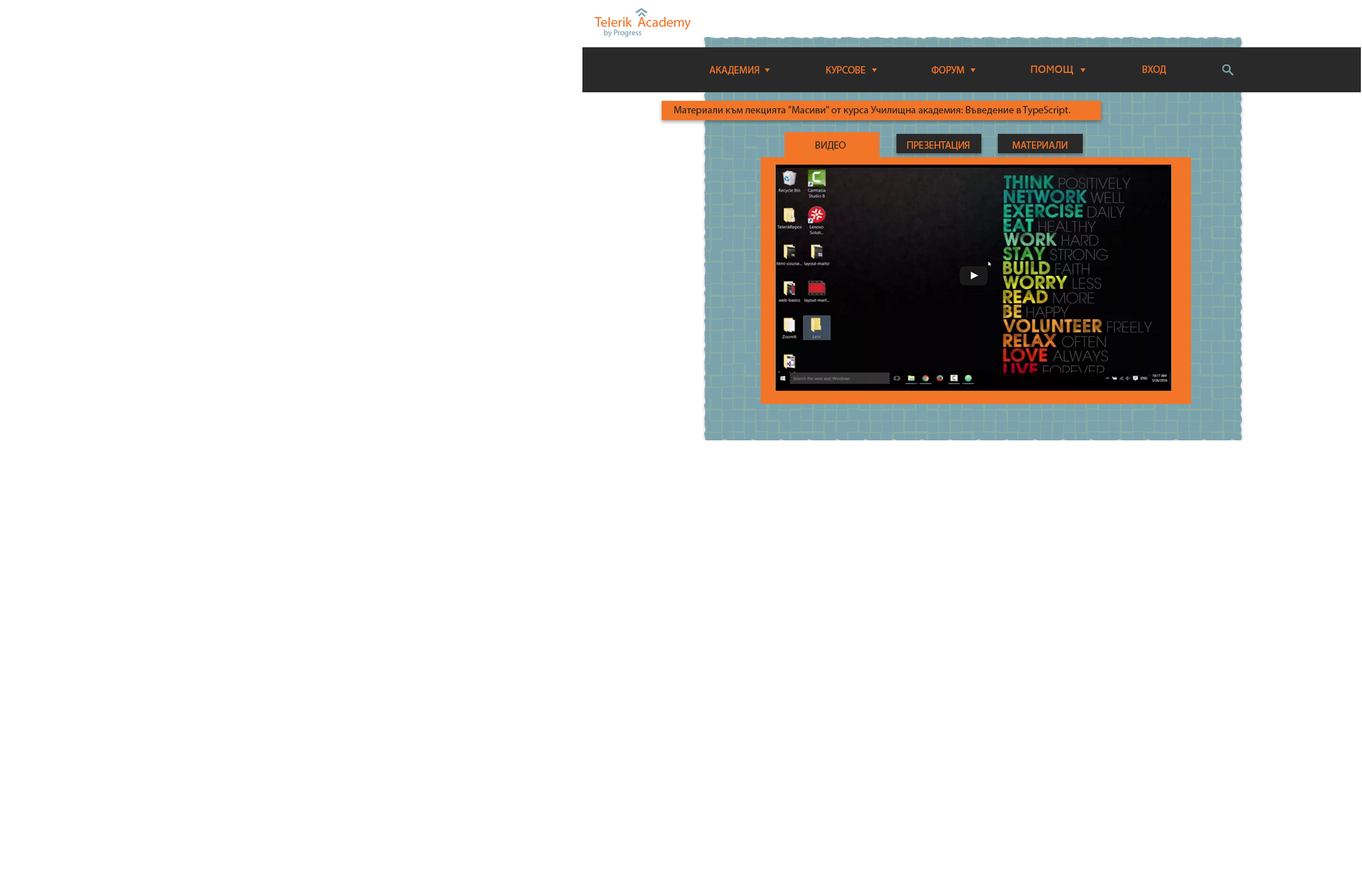
<style>
.page{position:relative;width:1362px;height:875px;background:#ffffff}
.page>*{position:absolute;margin:0}
.t1{font:10.3px "MSReferenceSansSerif";color:#f37528}
.t2{font:10.3px "MyriadPro-Regular";color:#f37528}
.t3{font:10.3px "MyriadPro-Regular";color:#292929}
</style>
<div class="page">
<p class="t1" style="left:1031px;top:66px;width:42px;height:9px">ПОМОЩ</p>
<p class="t2" style="left:1143px;top:66px;width:23px;height:9px">ВХОД</p>
<p class="t2" style="left:710px;top:66px;width:49px;height:9px">АКАДЕМИЯ</p>
<p class="t2" style="left:826px;top:66px;width:40px;height:8px">КУРСОВЕ</p>
<p class="t2" style="left:932px;top:66px;width:32px;height:8px">ФОРУМ</p>
<p class="t3" style="left:674px;top:106px;width:396px;height:10px">Материали към лекцията "Масиви" от курса Училищна академия: Въведение в TypeScript.</p>
<p class="t3" style="left:816px;top:141px;width:30px;height:9px">ВИДЕО</p>
<p class="t2" style="left:907px;top:141px;width:62px;height:9px">ПРЕЗЕНТАЦИЯ</p>
<p class="t2" style="left:1013px;top:141px;width:54px;height:8px">МАТЕРИАЛИ</p>
</div>
